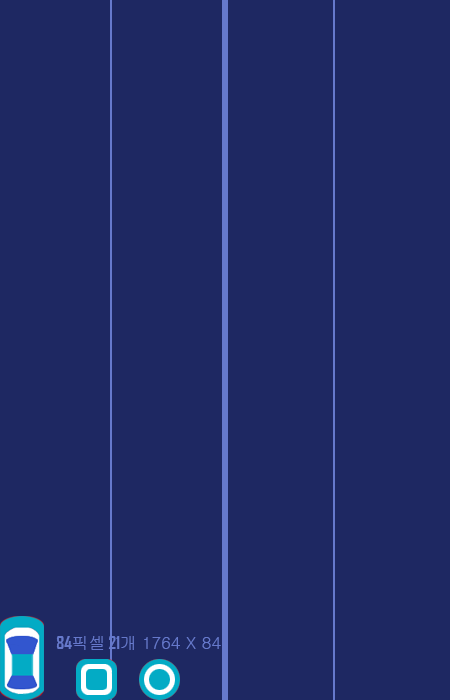
<style>
.page{position:relative;width:450px;height:700px;background:#1e2862}
.page>*{position:absolute;margin:0}
.t1{font:16.7px "Gulim";color:#6679cc}
.t2{font:16.7px "AgencyFB-Bold";color:#6679cc}
</style>
<div class="page">
<p class="t1" style="left:56px;top:636px;width:165px;height:14px"><span class="t2">84</span>픽셀<span class="t2"> 21</span>개 1764 X 84</p>
</div>
